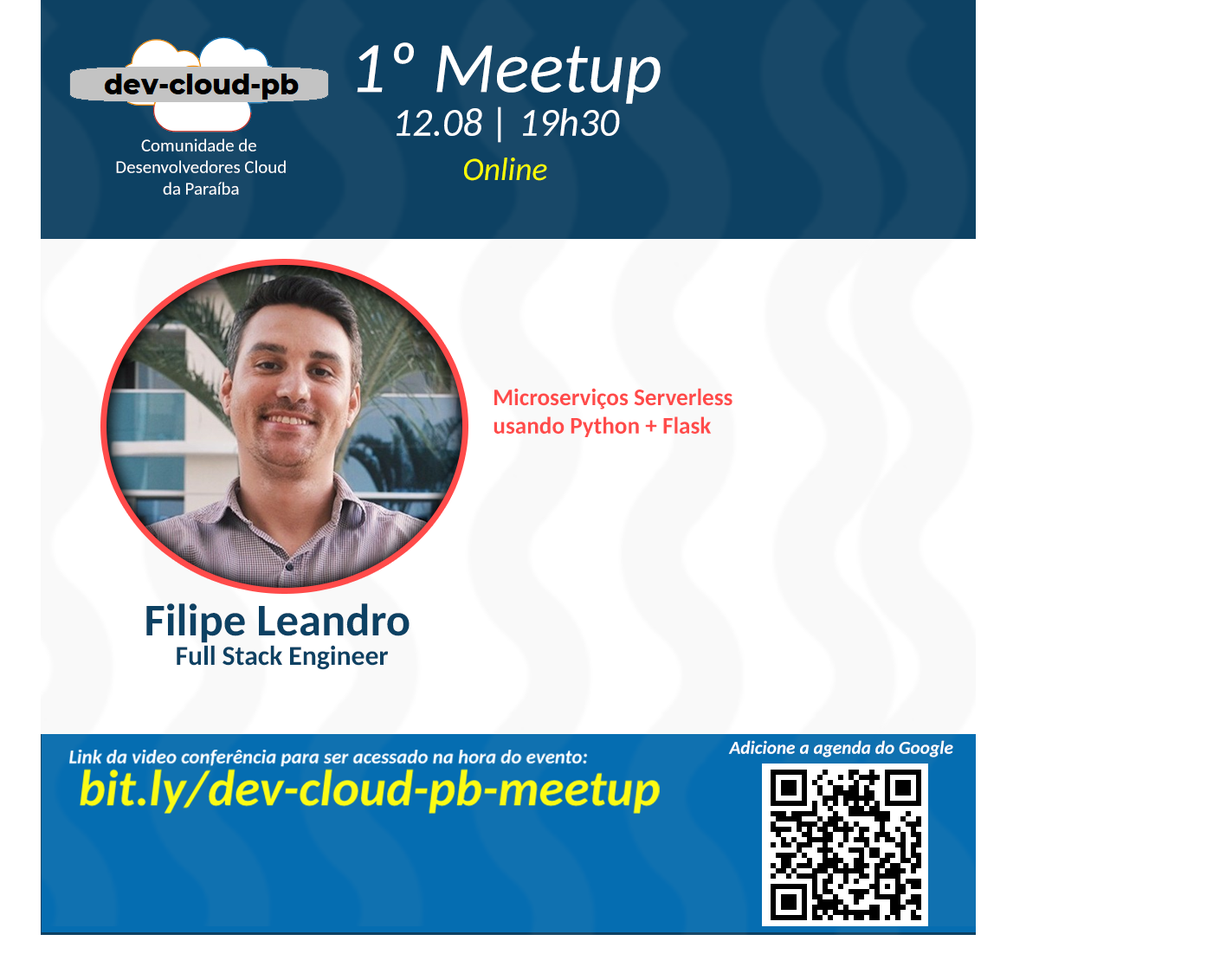
<style>
.page{position:relative;width:1226px;height:973px;background:#ffffff}
.page>*{position:absolute;margin:0}
.t1{font:72.3px "Carlito-Italic";color:#ffffff}
.t2{font:39.6px "Carlito-Italic";color:#ffffff}
.t3{font:18px "Carlito";color:#ffffff}
.t4{font:32.4px "Carlito-Italic";color:#f8fb00}
.t5{font:23.5px "Carlito-Bold";color:#ff4b4a}
.t6{font:45.5px "Carlito-Bold";color:#0d4163}
.t7{font:27.3px "Carlito-Bold";color:#0d4163}
.t8{font:18.4px "Carlito-BoldItalic";color:#ffffff}
</style>
<div class="page">
<p class="t1" style="left:357px;top:42px;width:303px;height:62px">1º Meetup</p>
<p class="t2" style="left:396px;top:106px;width:224px;height:37px">12.08 | 19h30</p>
<p class="t3" style="left:116px;top:138px;width:170px;height:57px;text-align:center">Comunidade de <br>Desenvolvedores Cloud<br>da Paraíba</p>
<p class="t4" style="left:464px;top:158px;width:83px;height:23px">Online</p>
<p class="t5" style="left:493px;top:388px;width:239px;height:49px">Microserviços Serverless <br>usando Python + Flask</p>
<p class="t6" style="left:146px;top:603px;width:263px;height:40px">Filipe Leandro</p>
<p class="t7" style="left:177px;top:645px;width:211px;height:25px">Full Stack Engineer</p>
<p class="t8" style="left:728px;top:740px;width:225px;height:17px">Adicione a agenda do Google</p>
</div>
